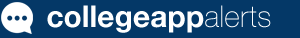
<style>
.page{position:relative;width:300px;height:38px;background:#043867}
.page>*{position:absolute;margin:0}
.t1{font:30px "HelveticaNeue-Bold";color:#ffffff}
.t2{font:30px "HelveticaNeue-Thin";color:#ffffff}
</style>
<div class="page">
<p class="t1" style="left:47px;top:5px;width:224px;height:28px">collegeapp<span class="t2">alerts</span></p>
</div>
